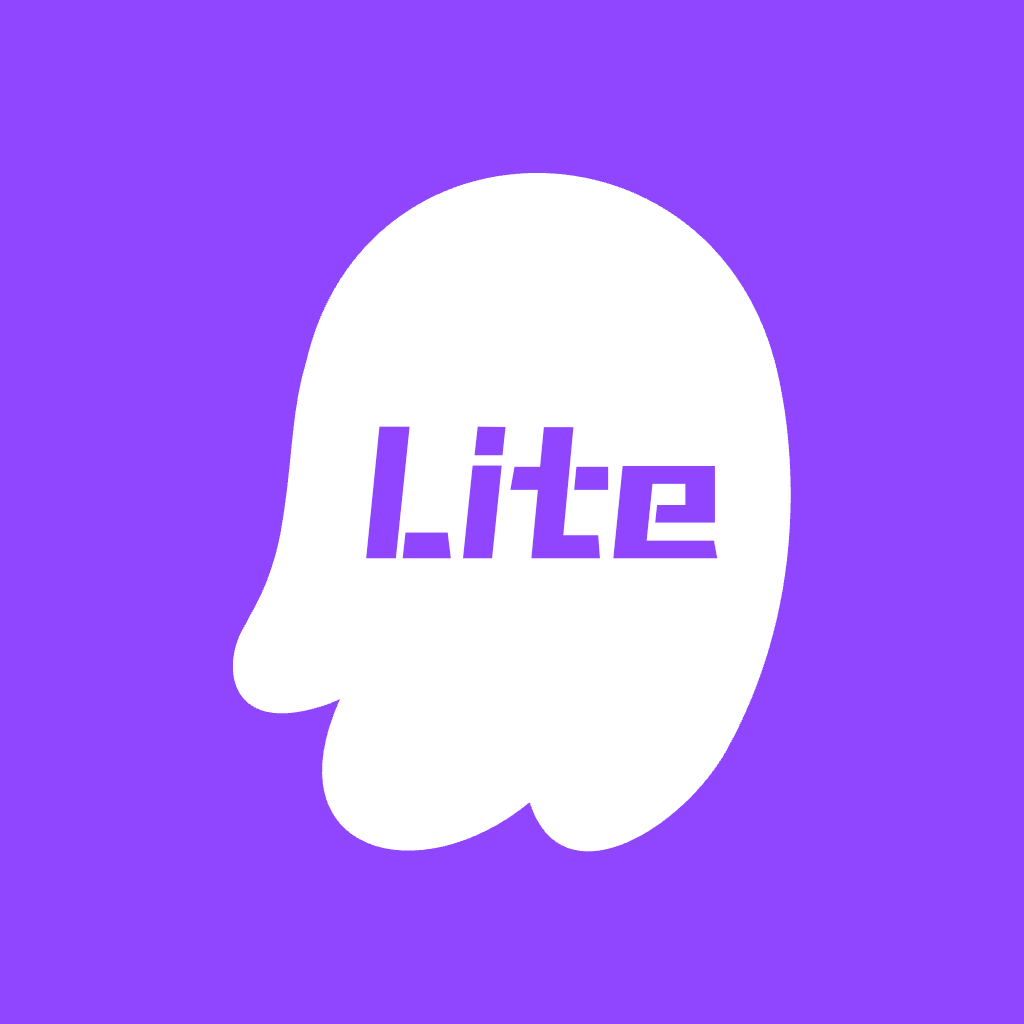
<style>
.page{position:relative;width:1024px;height:1024px;background:#9046ff}
.page>*{position:absolute;margin:0}
.t1{font:158px "REEJI-LanjinGB-Flash-Black";color:#9046ff}
</style>
<div class="page">
<p class="t1" style="left:366px;top:426px;width:352px;height:133px">Lite</p>
</div>
